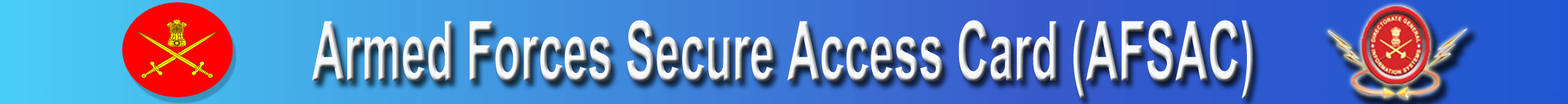
<style>
.page{position:relative;width:1568px;height:104px}
.page>*{position:absolute;margin:0}
.t1{font:82.9px "Arial-BoldMT";color:#f7f8fa;scale:0.54 1}
.t2{font:104.8px "Arial-BoldMT";color:#f7f8fa;scale:0.54 1}
</style>
<div class="page">
<p class="t1" style="left:312px;top:20px;width:941px;height:79px"><span class="t2">        </span>Armed Forces Secure Access Card (AFSAC)</p>
</div>
